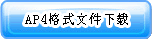
<style>
.page{position:relative;width:152px;height:39px;background:#ffffff}
.page>*{position:absolute;margin:0}
.t1{font:14px "SimSun";letter-spacing:0.05em;color:#000000;scale:0.9 1}
</style>
<div class="page">
<p class="t1" style="left:25px;top:13px;width:103px;height:12px">AP4格式文件下载</p>
</div>
